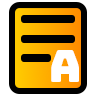
<style>
.page{position:relative;width:96px;height:96px;background:#000000}
.page>*{position:absolute;margin:0}
.t1{font:44.3px "Bungee-Regular";letter-spacing:0.04em;color:#ffffff}
</style>
<div class="page">
<p class="t1" style="left:51px;top:50px;width:28px;height:32px">A</p>
</div>
